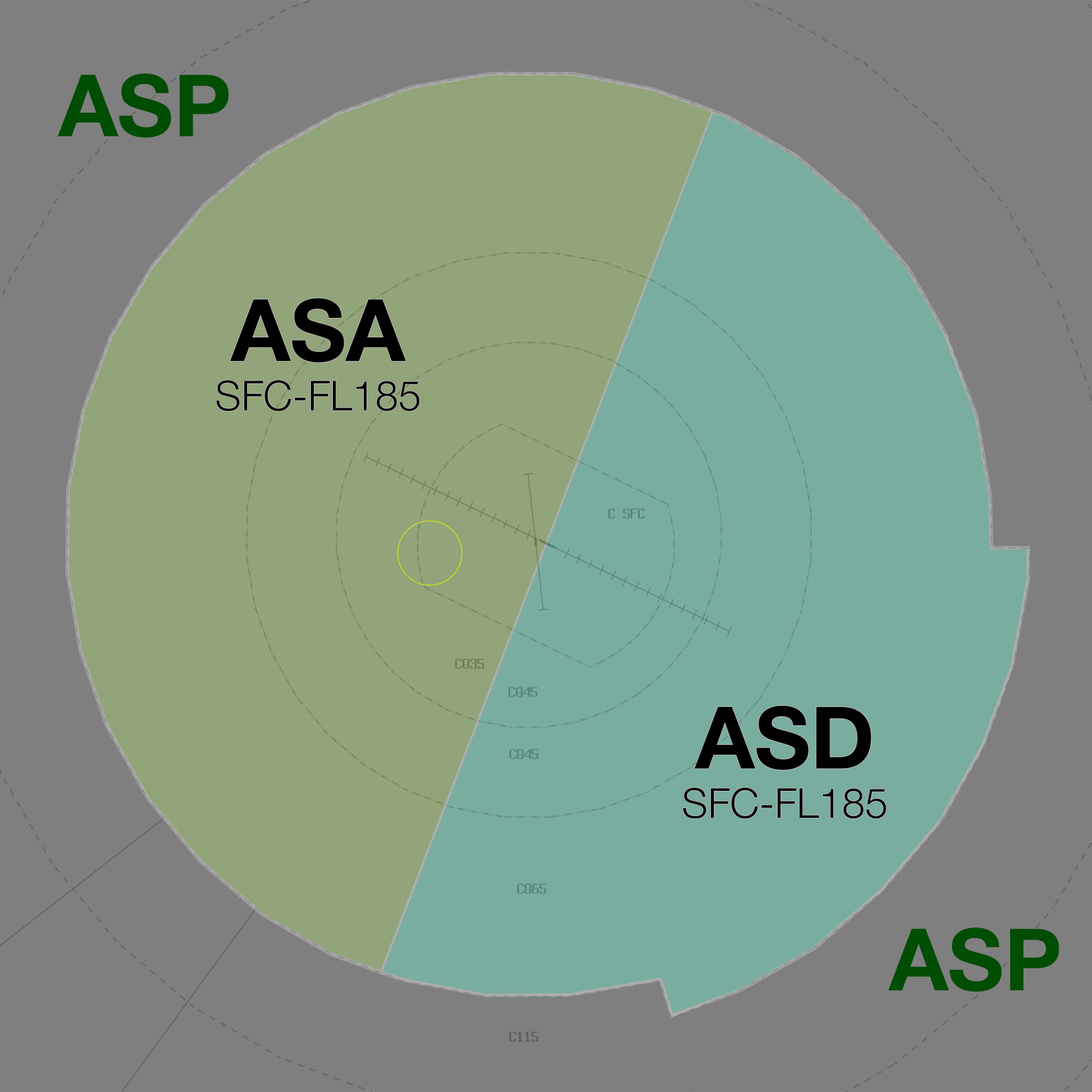
<style>
.page{position:relative;width:1092px;height:1092px;background:#7f7f7f}
.page>*{position:absolute;margin:0}
.t1{font:86.2px "HelveticaNeue-Bold";color:#004d04}
.t2{font:41.4px "HelveticaNeue-Light";color:#000000}
.t3{font:86.2px "HelveticaNeue-Bold";color:#000000}
</style>
<div class="page">
<p class="t1" style="left:57px;top:73px;width:172px;height:65px">ASP</p>
<p class="t2" style="left:216px;top:298px;width:204px;height:114px;text-align:center"><span class="t3">ASA<br></span>SFC-FL185</p>
<p class="t2" style="left:683px;top:705px;width:203px;height:114px;text-align:center"><span class="t3">ASD<br></span>SFC-FL185</p>
<p class="t1" style="left:888px;top:927px;width:171px;height:65px">ASP</p>
</div>
